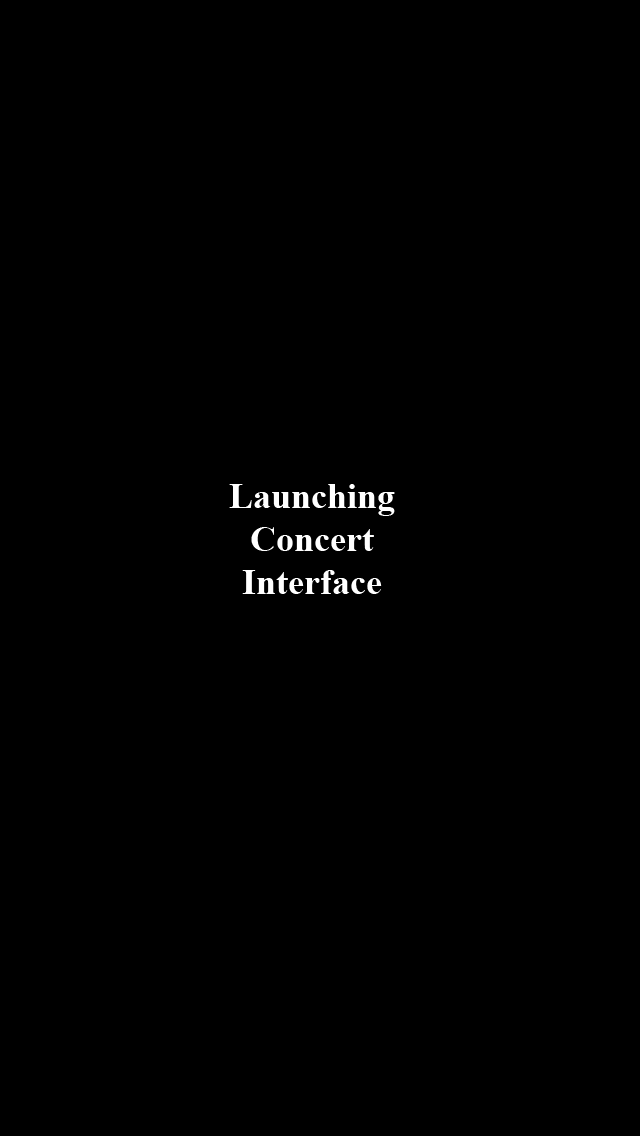
<style>
.page{position:relative;width:640px;height:1136px;background:#000000}
.page>*{position:absolute;margin:0}
.t1{font:36px "TimesNewRomanPS-BoldMT";color:#ffffff}
</style>
<div class="page">
<p class="t1" style="left:229px;top:484px;width:166px;height:110px;text-align:center">Launching<br>Concert<br>Interface</p>
</div>
